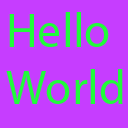
<style>
.page{position:relative;width:128px;height:128px;background:#c63dff}
.page>*{position:absolute;margin:0}
.t1{font:48px "MyriadPro-Regular";color:#20fc3a}
</style>
<div class="page">
<p class="t1" style="left:6px;top:12px;width:117px;height:92px">Hello<br>World</p>
</div>
